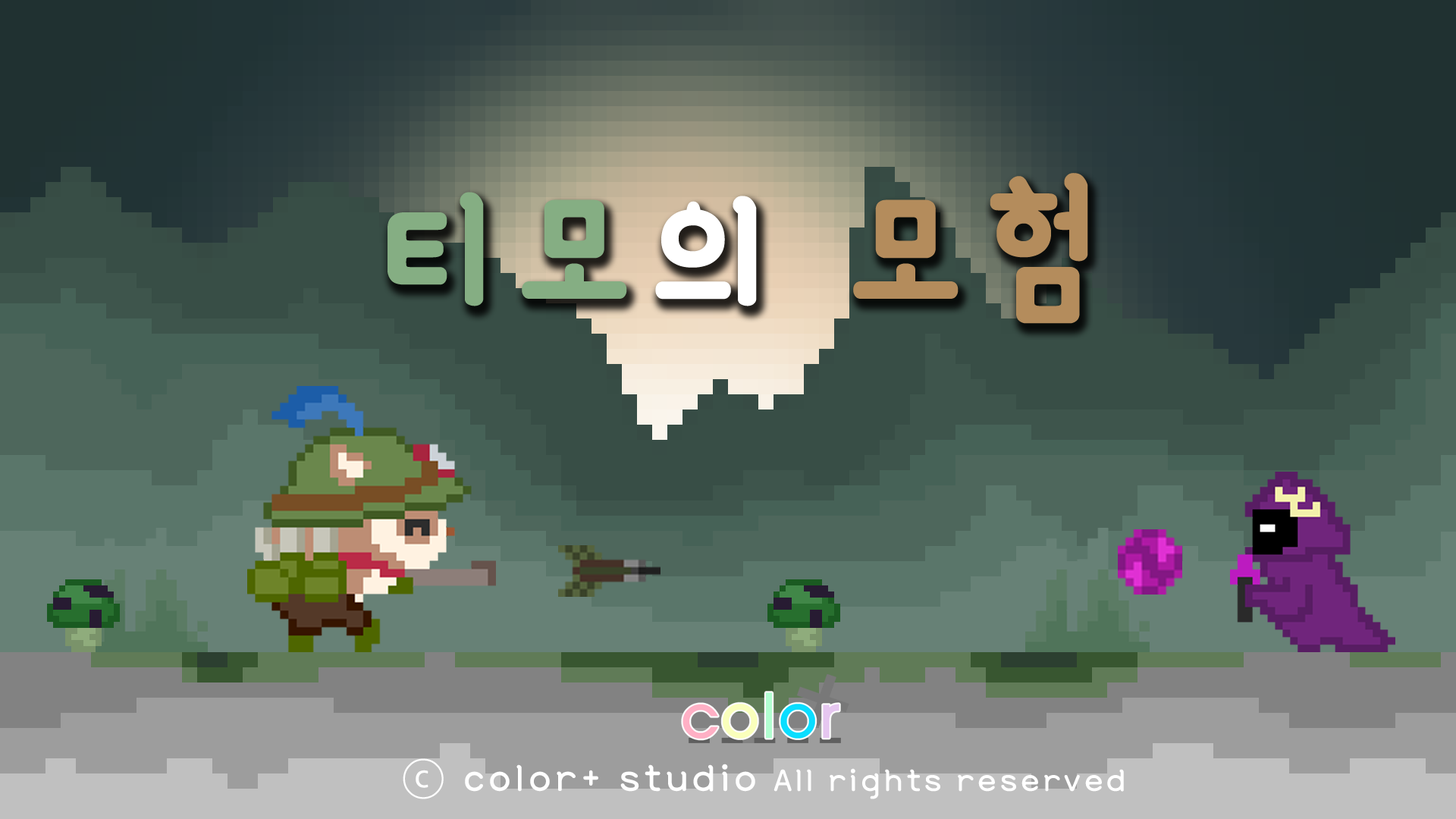
<style>
.page{position:relative;width:1456px;height:819px}
.page>*{position:absolute;margin:0}
.t1{font:189.6px "YanoljaYacheB";letter-spacing:0.1em;color:#85ae83}
.t2{font:189.6px "YanoljaYacheB";letter-spacing:0.1em;color:#ffffff}
.t3{font:189.6px "YanoljaYacheB";letter-spacing:0.1em;color:#b48c5c}
.t4{font:37.9px "YanoljaYacheR";letter-spacing:0.1em;color:#ffffff}
.t5{font:45.5px "YanoljaYacheR";letter-spacing:0.1em;color:#ffffff}
</style>
<div class="page">
<p class="t1" style="left:388px;top:173px;width:700px;height:151px">티모<span class="t2">의 </span><span class="t3">모험</span></p>
<p class="t4" style="left:403px;top:758px;width:721px;height:41px"><span class="t5">ⓒ color+ studio</span> All rights reserved</p>
</div>
